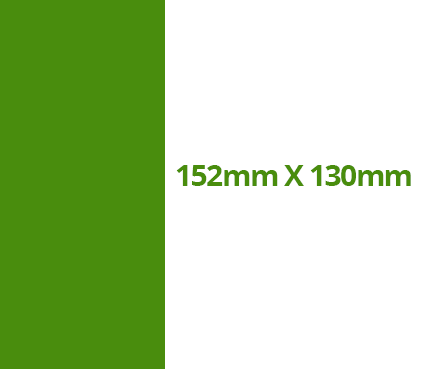
<style>
.page{position:relative;width:431px;height:369px;background:#ffffff}
.page>*{position:absolute;margin:0}
.t1{font:30px "OpenSans-Bold";letter-spacing:-0.05em;color:#498d0d}
</style>
<div class="page">
<p class="t1" style="left:176px;top:165px;width:235px;height:21px">152mm X 130mm</p>
</div>
